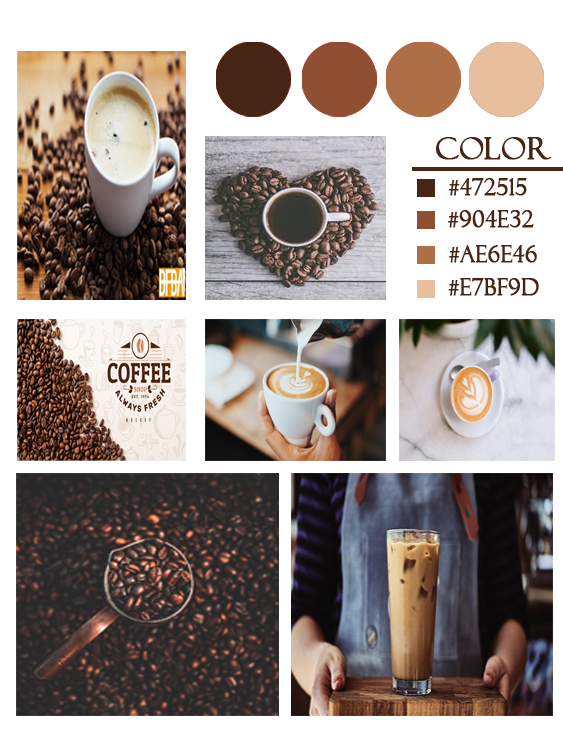
<style>
.page{position:relative;width:563px;height:738px;background:#ffffff}
.page>*{position:absolute;margin:0}
.t1{font:30px "FelixTitlingMT";color:#472515;font-weight:bold}
.t2{font:22.5px "FelixTitlingMT";color:#472515;font-weight:bold;scale:0.95 1}
</style>
<div class="page">
<p class="t1" style="left:436px;top:137px;width:115px;height:23px">color</p>
<p class="t2" style="left:448px;top:178px;width:79px;height:18px">#472515</p>
<p class="t2" style="left:448px;top:210px;width:86px;height:18px">#904e32</p>
<p class="t2" style="left:449px;top:245px;width:88px;height:18px">#ae6e46</p>
<p class="t2" style="left:448px;top:278px;width:91px;height:18px">#e7bf9d</p>
</div>
